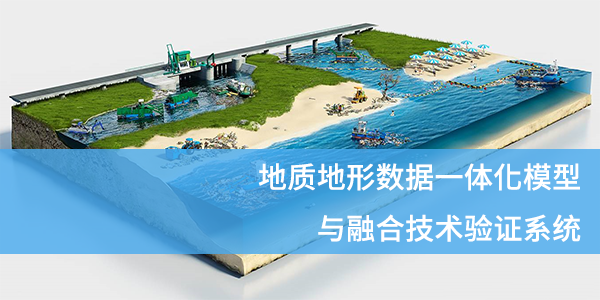
<style>
.page{position:relative;width:600px;height:300px}
.page>*{position:absolute;margin:0}
.t1{font:29.3px "SourceHanSansTC-Medium";letter-spacing:0.01em;color:#ffffff}
</style>
<div class="page">
<p class="t1" style="left:258px;top:163px;width:323px;height:79px;text-align:right">地质地形数据一体化模型<br>与融合技术验证系统</p>
</div>
